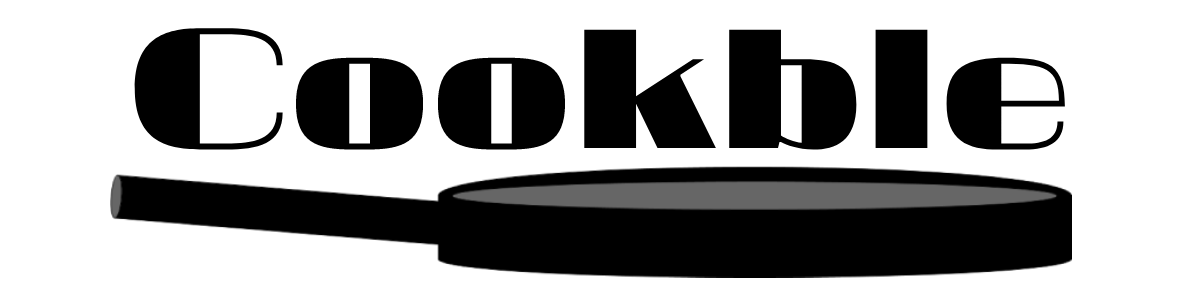
<style>
.page{position:relative;width:1200px;height:300px;background:#ffffff}
.page>*{position:absolute;margin:0}
.t1{font:147.9px "20db";color:#000000}
</style>
<div class="page">
<p class="t1" style="left:134px;top:28px;width:931px;height:122px">Cookble</p>
</div>
